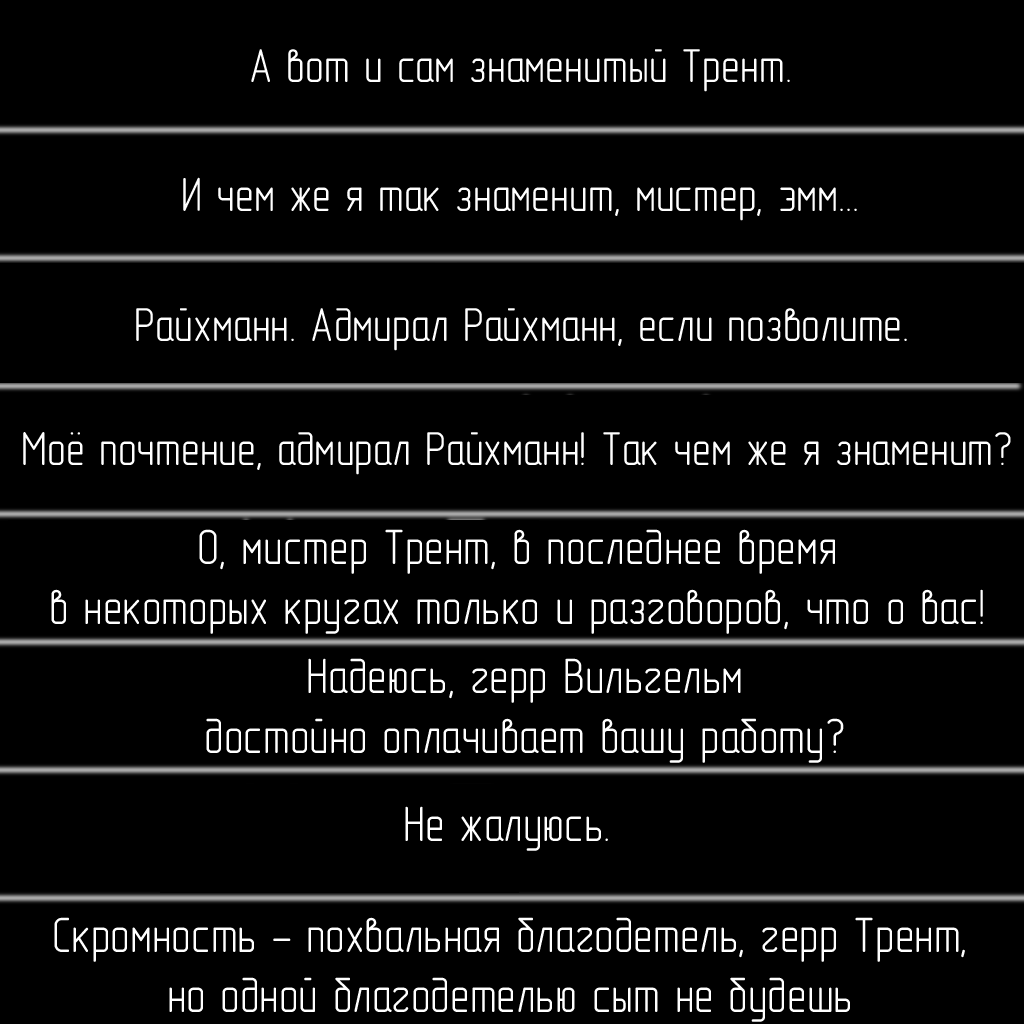
<style>
.page{position:relative;width:1024px;height:1024px;background:#000000}
.page>*{position:absolute;margin:0}
.t1{font:48px "GOST-2.304-81typeA";color:#ffffff}
.t2{font:50px "GOST-2.304-81typeA";color:#ffffff}
</style>
<div class="page">
<p class="t1" style="left:251px;top:49px;width:539px;height:43px">А вот и сам знаменитый Трент.</p>
<p class="t1" style="left:183px;top:177px;width:674px;height:44px">И чем же я так знаменит, мистер, эмм...</p>
<p class="t1" style="left:136px;top:308px;width:771px;height:43px">Райхманн. Адмирал Райхманн, если позволите.</p>
<p class="t1" style="left:23px;top:432px;width:988px;height:43px">Моё почтение, адмирал Райхманн! Так чем же я знаменит?</p>
<p class="t2" style="left:51px;top:529px;width:932px;height:105px;text-align:center">О, мистер Трент, в последнее время<br>в некоторых кругах только и разговоров, что о вас!</p>
<p class="t2" style="left:206px;top:658px;width:638px;height:105px;text-align:center">Надеюсь, герр Вильгельм<br>достойно оплачивает вашу работу?</p>
<p class="t2" style="left:405px;top:806px;width:203px;height:45px">Не жалуюсь.</p>
<p class="t2" style="left:54px;top:917px;width:911px;height:105px;text-align:center">Скромность - похвальная благодетель, герр Трент,<br>но одной благодетелью сыт не будешь</p>
</div>
